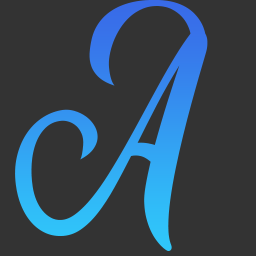
<style>
.page{position:relative;width:256px;height:256px;background:#333333}
.page>*{position:absolute;margin:0}
.t1{font:120px "Amsterdam"}
</style>
<div class="page">
<p class="t1" style="left:15px;top:0px;width:193px;height:251px">A</p>
</div>
